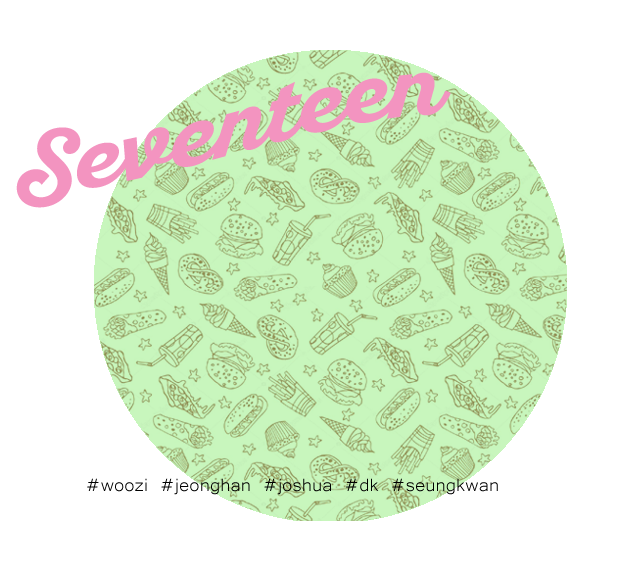
<style>
.page{position:relative;width:635px;height:567px;background:#ffffff}
.page>*{position:absolute;margin:0}
.t1{font:81.2px "SantEliaScript-BoldDMO";color:#f394c0;scale:1.09 1}
.t2{font:22.7px "Microsoft-Yi-Baiti";color:#000000;scale:1.09 1}
</style>
<div class="page">
<p class="t1" style="left:16px;top:72px;width:435px;height:136px">Seventeen</p>
<p class="t2" style="left:87px;top:478px;width:411px;height:17px">#woozi #jeonghan #joshua #dk #seungkwan</p>
</div>
